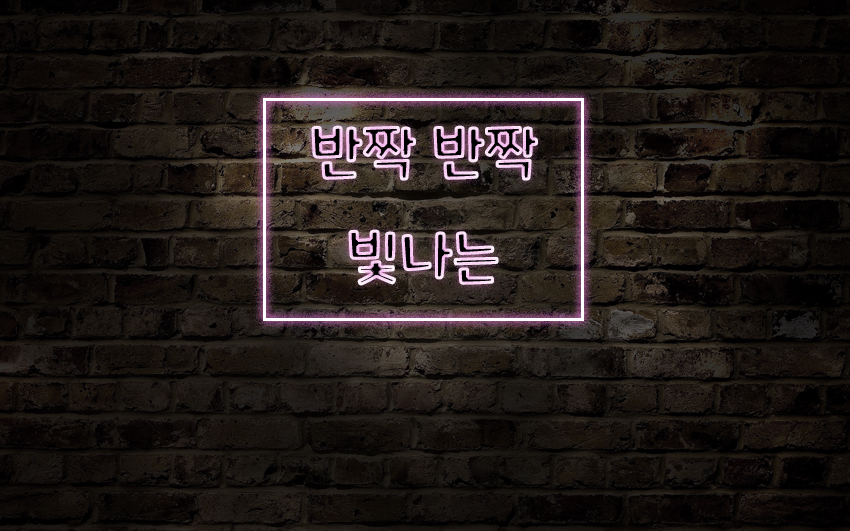
<style>
.page{position:relative;width:850px;height:531px}
.page>*{position:absolute;margin:0}
.t1{font:60px "MaplestoryBold"}
</style>
<div class="page">
<p class="t1" style="left:311px;top:125px;width:227px;height:161px;text-align:center">반짝 반짝 <br>빛나는</p>
</div>
